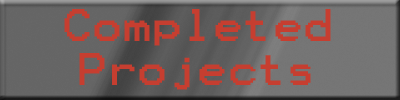
<style>
.page{position:relative;width:400px;height:100px}
.page>*{position:absolute;margin:0}
.t1{font:36.5px "Terminal";color:#c63e30;scale:1.1 1}
</style>
<div class="page">
<p class="t1" style="left:64px;top:9px;width:267px;height:81px;text-align:center">Completed <br>Projects</p>
</div>
